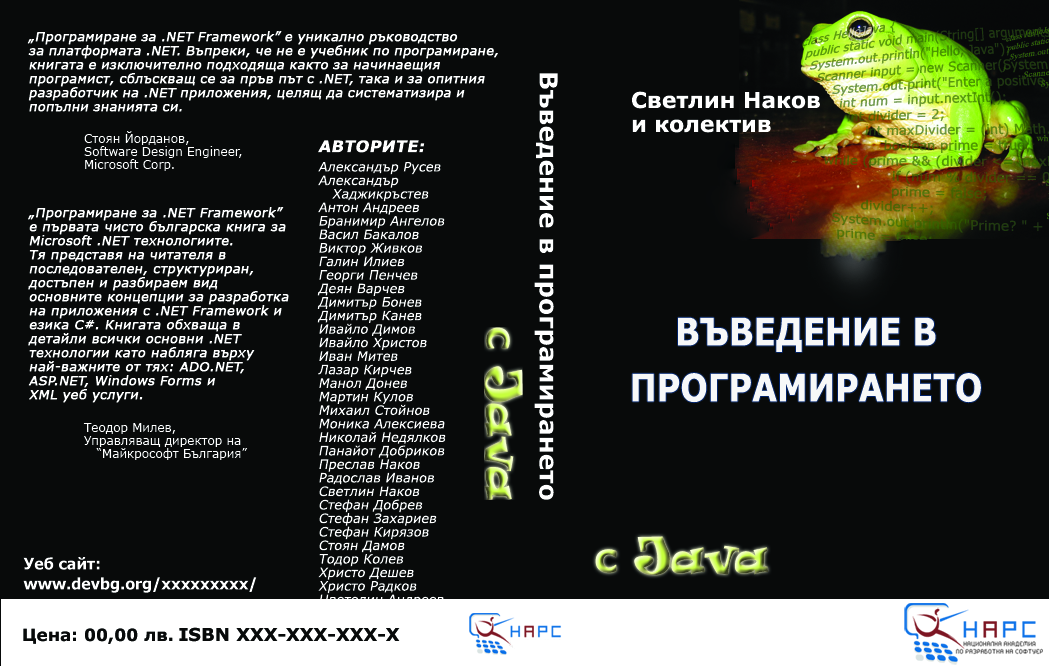
<style>
.page{position:relative;width:1049px;height:666px;background:#080a0a}
.page>*{position:absolute;margin:0}
.t1{font:13px/14px "Verdana";color:#ffffff;font-weight:bold;font-style:italic}
.t2{font:25px "Verdana-Bold";color:#ffffff}
.t3{font:22px/24px "Verdana-Bold";color:#ffffff}
.t4{font:12px/13px "Verdana";color:#ffffff}
.t5{font:12px/13px "Tahoma";color:#252b2d}
.t6{font:16px "Verdana-Bold";color:#ffffff;text-transform:uppercase;font-weight:bold;font-style:italic}
.t7{font:13px/13.5px "Verdana";color:#ffffff;font-style:italic}
.t8{font:13px/13.5px "Tahoma";color:#123eaf;font-style:italic}
.t9{font:13px/14px "Tahoma";color:#24282b;font-weight:bold;font-style:italic}
.t10{font:38px/28px "Verdana-Bold";color:#ffffff;scale:0.85 1}
.t11{font:40px "Ravie"}
.t12{font:40px "Verdana-Bold"}
.t13{font:48px "Ravie"}
.t14{font:16px/20px "Tahoma-Bold";color:#ffffff}
.t15{font:17px "Verdana-Bold";color:#080a0a}
.t16{font:17px "Tahoma-Bold";color:#123eaf}
.t17{font:18px "Verdana-Bold";color:#080a0a;text-transform:uppercase}
</style>
<div class="page">
<p class="t1" style="left:27px;top:31px;width:471px;height:81px;text-align:justify">„Програмиране за .NET Framework” е уникално ръководство <br>за платформата .NET. Въпреки, че не е учебник по програмиране,<br>книгата е изключително подходяща както за начинаещия <br>програмист, сблъскващ се за пръв път с .NET, така и за опитния <br>разработчик на .NET приложения, целящ да систематизира и <br>попълни знанията си.</p>
<p class="t2" style="left:534px;top:73px;width:24px;height:427px;rotate:90deg">Въведение в програмирането</p>
<p class="t3" style="left:632px;top:91px;width:188px;height:42px">Светлин Наков<br>и колектив</p>
<p class="t4" style="left:84px;top:131px;width:158px;height:40px;text-align:justify"><span class="t5"><br></span>Стоян Йорданов,<br>Software Design Engineer,<br>Microsoft Corp.</p>
<p class="t6" style="left:318px;top:140px;width:107px;height:13px">Авторите:</p>
<p class="t7" style="left:317px;top:162px;width:129px;height:459px"><span class="t8"><br></span>Александър Русев<br>Александър <br>   Хаджикръстев<br>Антон Андреев<br>Бранимир Ангелов<br>Васил Бакалов<br>Виктор Живков<br>Галин Илиев<br>Георги Пенчев<br>Деян Варчев<br>Димитър Бонев<br>Димитър Канев<br>Ивайло Димов<br>Ивайло Христов<br>Иван Митев<br>Лазар Кирчев<br>Манол Донев<br>Мартин Кулов<br>Михаил Стойнов<br>Моника Алексиева<br>Николай Недялков<br>Панайот Добриков<br>Преслав Наков<br>Радослав Иванов<br>Светлин Наков<br>Стефан Добрев<br>Стефан Захариев<br>Стефан Кирязов<br>Стоян Дамов<br>Тодор Колев<br>Христо Дешев<br>Христо Радков<br>Цветелин Андреев<br>Явор Ташев</p>
<p class="t1" style="left:28px;top:207px;width:261px;height:196px"><span class="t9"><br></span>„Програмиране за .NET Framework” <br>е първата чисто българска книга за<br>Microsoft .NET технологиите. <br>Тя представя на читателя в <br>последователен, структуриран, <br>достъпен и разбираем вид <br>основните концепции за разработка <br>на приложения с .NET Framework и <br>езика C#. Книгата обхваща в <br>детайли всички основни .NET <br>технологии като набляга върху <br>най-важните от тях: ADO.NET,<br>ASP.NET, Windows Forms и <br>XML уеб услуги.</p>
<p class="t10" style="left:632px;top:317px;width:349px;height:86px;text-align:center">ВЪВЕДЕНИЕ В<br><br>ПРОГРАМИРАНЕТО</p>
<p class="t4" style="left:83px;top:423px;width:165px;height:37px;text-align:justify">Теодор Милев,<br>Управляващ директор на <br>   “Майкрософт България”</p>
<p class="t11" style="left:595px;top:536px;width:173px;height:39px"><span class="t12">с </span><span class="t13">J</span>ava</p>
<p class="t14" style="left:23px;top:557px;width:234px;height:36px">Уеб сайт:<br>www.devbg.org/ххххххххх/</p>
<p class="t15" style="left:23px;top:628px;width:150px;height:16px"><span class="t16"> </span>Цена: 00,00 лв.</p>
<p class="t17" style="left:179px;top:627px;width:221px;height:15px">isbn ххх-ххх-ххх-х</p>
</div>
